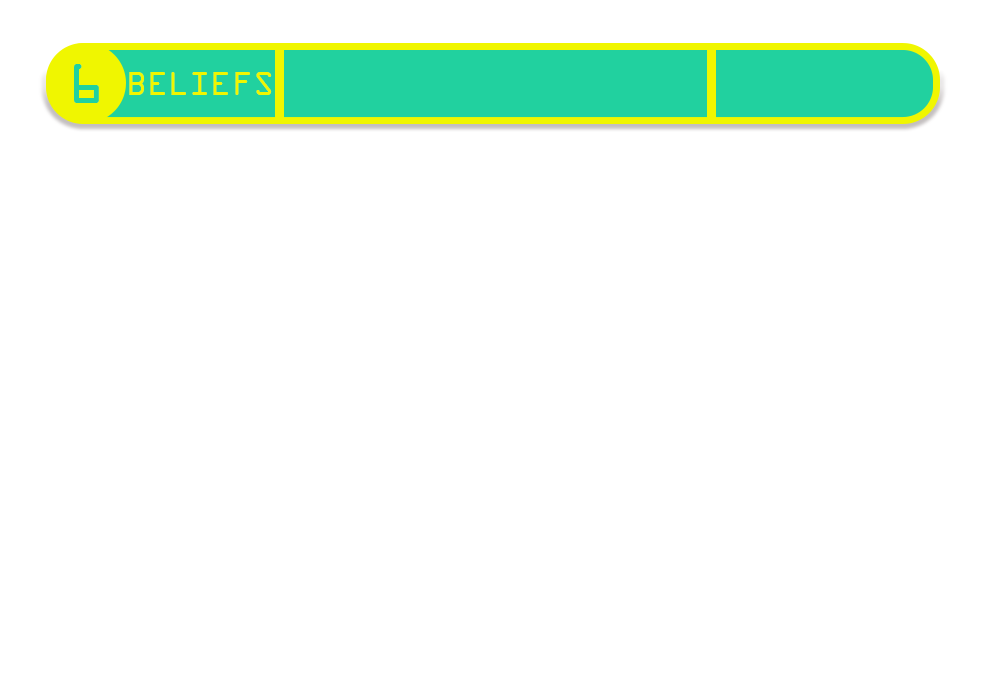
<style>
.page{position:relative;width:986px;height:693px;background:#ffffff}
.page>*{position:absolute;margin:0}
.t1{font:60px "OCRAExtended";color:#21d19f}
.t2{font:35px "OCRAExtended";color:#f0f600}
</style>
<div class="page">
<p class="t1" style="left:74px;top:64px;width:25px;height:39px">6</p>
<p class="t2" style="left:129px;top:72px;width:143px;height:23px">BELIEFS</p>
</div>
